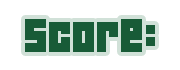
<style>
.page{position:relative;width:180px;height:70px;background:#ffffff}
.page>*{position:absolute;margin:0}
.t1{font:42.2px "04b19";color:#185b37}
</style>
<div class="page">
<p class="t1" style="left:25px;top:19px;width:130px;height:33px">Score:</p>
</div>
